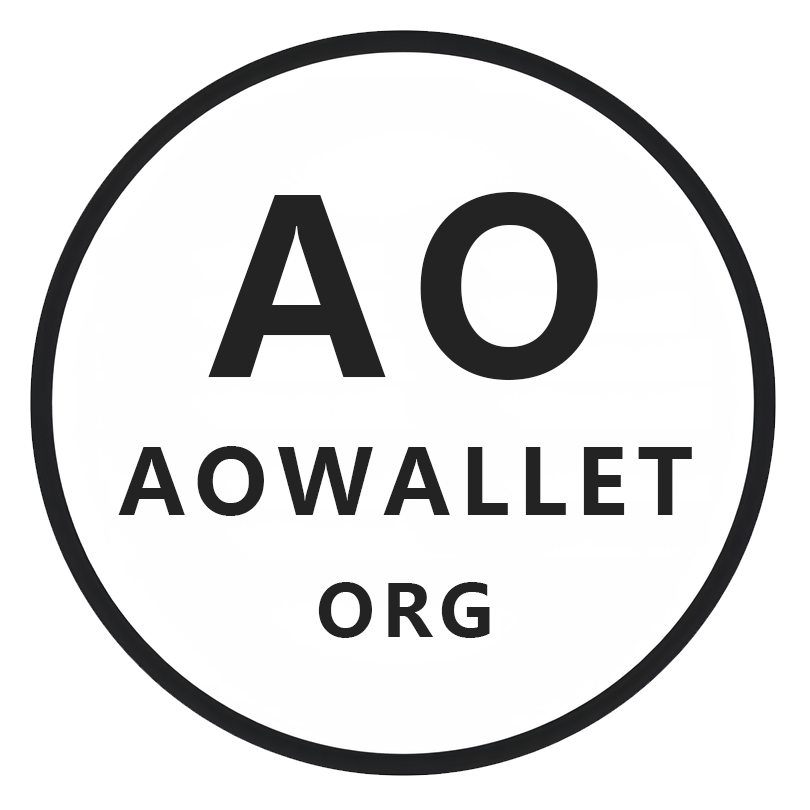
<style>
.page{position:relative;width:810px;height:810px;background:#ffffff}
.page>*{position:absolute;margin:0}
.t1{font:240px "MicrosoftYaHeiUI-Bold";letter-spacing:0.1em;color:#232324}
.t2{font:90px "MicrosoftYaHeiUI-Bold";letter-spacing:0.1em;color:#232324}
.t3{font:72px "MicrosoftYaHeiUI-Bold";letter-spacing:0.1em;color:#232324}
</style>
<div class="page">
<p class="t1" style="left:208px;top:192px;width:390px;height:188px">AO</p>
<p class="t2" style="left:118px;top:446px;width:574px;height:70px">AOWALLET</p>
<p class="t3" style="left:318px;top:582px;width:172px;height:56px">ORG</p>
</div>
